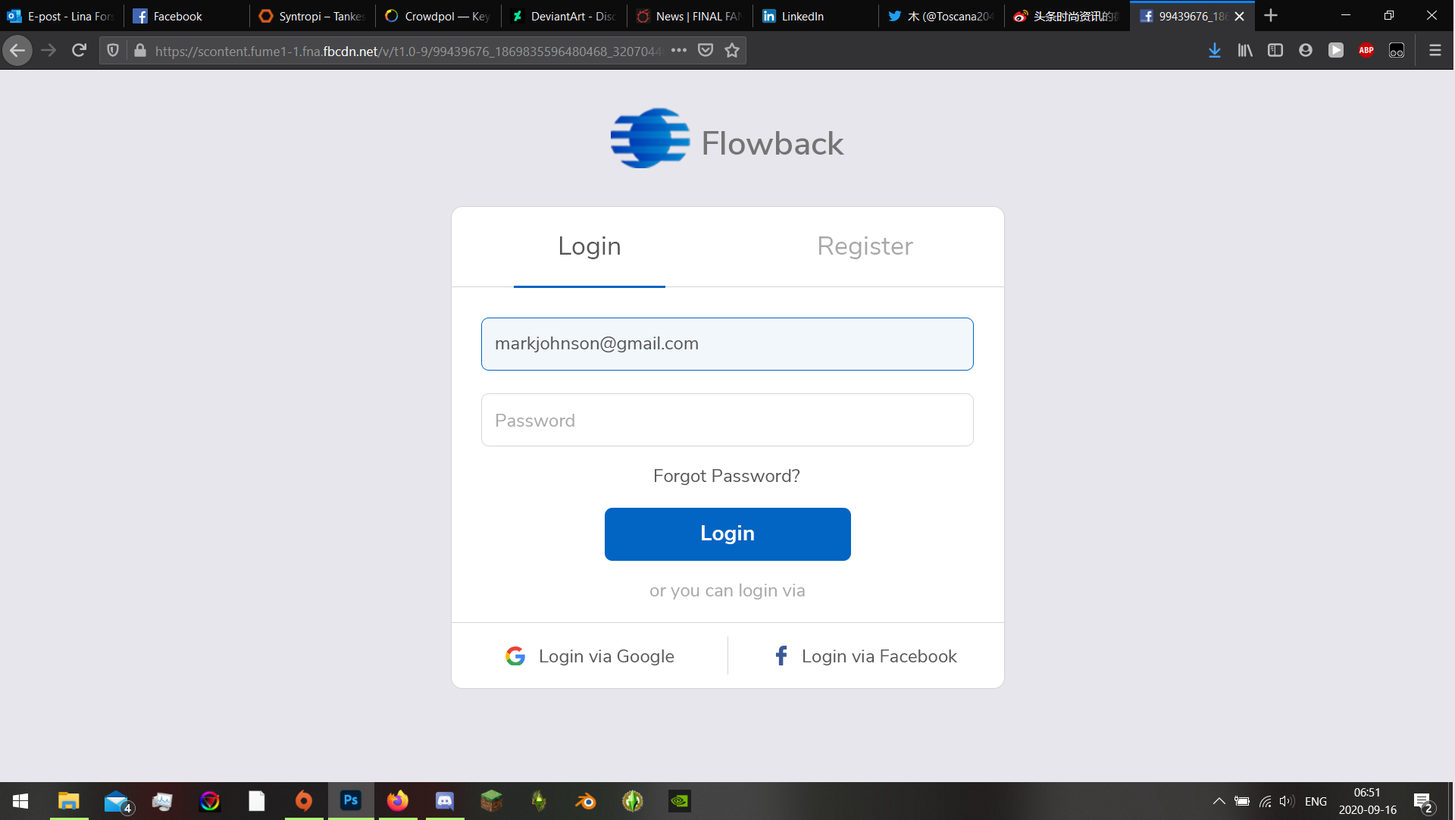
<style>
.page{position:relative;width:1455px;height:820px;background:#e7e6ed}
.page>*{position:absolute;margin:0}
.t1{font:33.2px "NunitoSans-SemiBold";color:#747474}
.t2{font:25.8px "NunitoSans-Regular";color:#575757}
.t3{font:25.8px "NunitoSans-Regular";color:#a8a8a8}
.t4{font:18.2px "NunitoSans-Regular";color:#575757}
.t5{font:18.2px "NunitoSans-Regular";color:#a8a8a8}
.t6{font:21.2px "NunitoSans-Bold";color:#ffffff}
</style>
<div class="page">
<p class="t1" style="left:703px;top:131px;width:142px;height:24px">Flowback</p>
<p class="t2" style="left:560px;top:236px;width:60px;height:23px">Login</p>
<p class="t3" style="left:819px;top:236px;width:94px;height:23px">Register</p>
<p class="t4" style="left:495px;top:336px;width:203px;height:16px">markjohnson@gmail.com</p>
<p class="t5" style="left:496px;top:414px;width:78px;height:13px">Password</p>
<p class="t4" style="left:655px;top:469px;width:145px;height:16px">Forgot Password?</p>
<p class="t6" style="left:702px;top:525px;width:52px;height:19px">Login</p>
<p class="t5" style="left:650px;top:583px;width:155px;height:16px">or you can login via</p>
<p class="t4" style="left:540px;top:649px;width:134px;height:16px">Login via Google</p>
<p class="t4" style="left:803px;top:649px;width:155px;height:16px">Login via Facebook</p>
</div>
